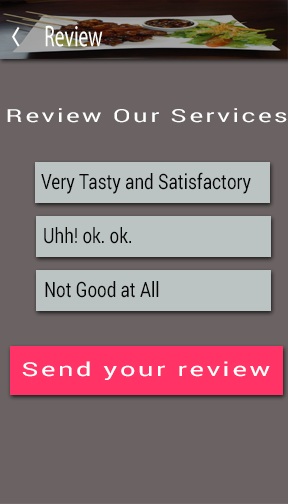
<style>
.page{position:relative;width:288px;height:504px;background:#6b6363}
.page>*{position:absolute;margin:0}
.t1{font:30px "MyriadPro-Regular";color:#fdfdfa;scale:0.65 1}
.t2{font:18px "Roboto-Regular";letter-spacing:0.1em;color:#ffffff;scale:1.43 1}
.t3{font:21px "Roboto-Regular";color:#060606;scale:0.81 1}
.t4{font:19px "Roboto-Regular";letter-spacing:0.1em;color:#ffffff;scale:1.43 1}
</style>
<div class="page">
<p class="t1" style="left:45px;top:25px;width:58px;height:22px">Review</p>
<p class="t2" style="left:7px;top:108px;width:280px;height:15px">Review Our Services</p>
<p class="t3" style="left:41px;top:172px;width:210px;height:22px">Very Tasty and Satisfactory</p>
<p class="t3" style="left:44px;top:227px;width:87px;height:17px">Uhh! ok. ok.</p>
<p class="t3" style="left:45px;top:281px;width:114px;height:17px">Not Good at All</p>
<p class="t4" style="left:22px;top:361px;width:248px;height:19px">Send your review</p>
</div>
